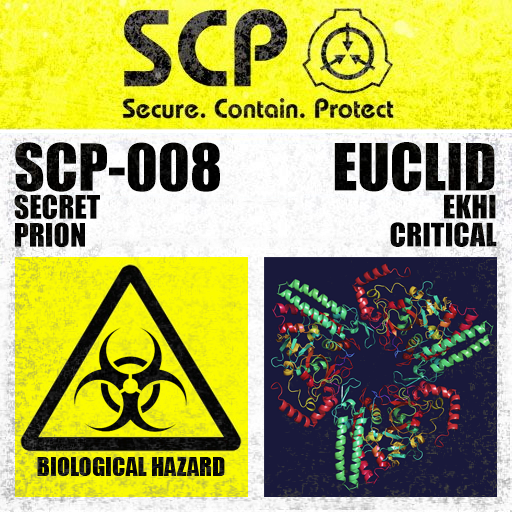
<style>
.page{position:relative;width:512px;height:512px}
.page>*{position:absolute;margin:0}
.t1{font:30px/28px "Impact";color:#000000}
.t2{font:60px/28px "Impact";color:#000000}
</style>
<div class="page">
<p class="t1" style="left:14px;top:142px;width:206px;height:106px"><span class="t2">SCP-008<br></span>SECRET<br>PRION</p>
<p class="t1" style="left:334px;top:142px;width:163px;height:105px;text-align:right"><span class="t2">EUCLID<br></span>EKHI<br>CRITICAL</p>
</div>
